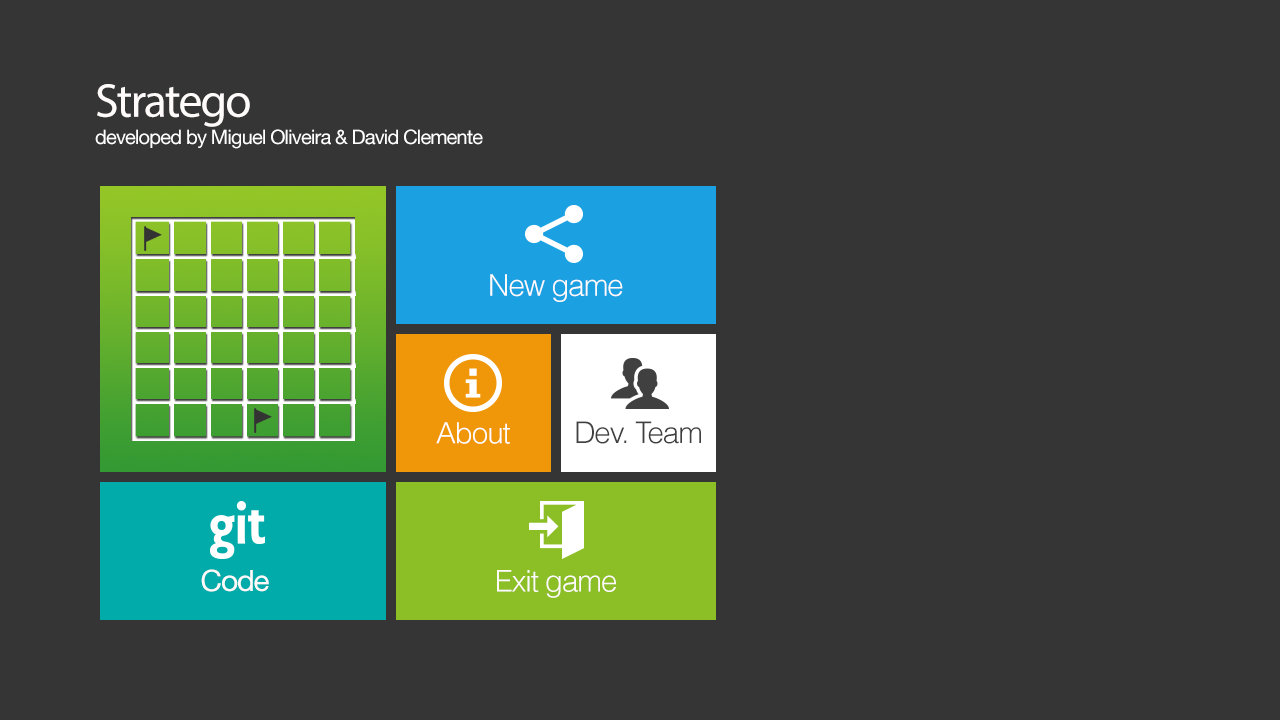
<style>
.page{position:relative;width:1280px;height:720px;background:#353535}
.page>*{position:absolute;margin:0}
.t1{font:48px "MyriadPro-Regular";letter-spacing:-0.04em;color:#fffbfb}
.t2{font:20px "HelveticaNeue";letter-spacing:-0.04em;color:#ffffff}
.t3{font:29.9px "Helvetica-Light";letter-spacing:-0.04em;color:#fffbfb}
.t4{font:29.4px "Helvetica-Light";letter-spacing:-0.04em;color:#ffffff}
.t5{font:29.7px "Helvetica-Light";letter-spacing:-0.04em;color:#404040}
.t6{font:29.4px "HelveticaNeue";letter-spacing:-0.04em;color:#fffbfb}
</style>
<div class="page">
<p class="t1" style="left:97px;top:84px;width:153px;height:43px">Stratego</p>
<p class="t2" style="left:95px;top:129px;width:388px;height:20px">developed by Miguel Oliveira &amp; David Clemente</p>
<p class="t3" style="left:490px;top:274px;width:133px;height:28px">New game</p>
<p class="t4" style="left:436px;top:422px;width:74px;height:22px">About</p>
<p class="t5" style="left:576px;top:421px;width:125px;height:23px">Dev. Team</p>
<p class="t6" style="left:201px;top:569px;width:68px;height:23px">Code</p>
<p class="t3" style="left:497px;top:570px;width:119px;height:28px">Exit game</p>
</div>
